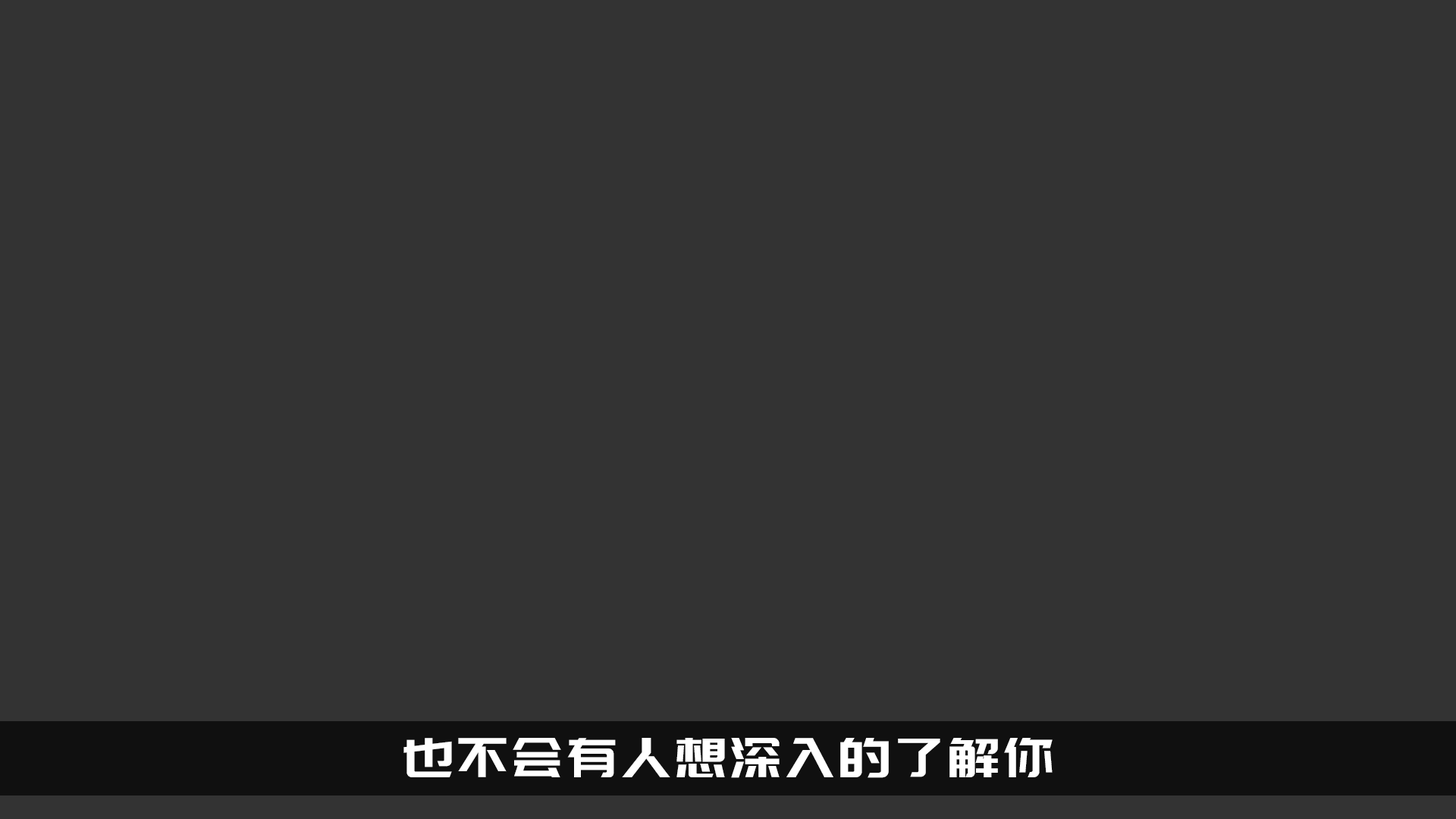
<style>
.page{position:relative;width:1456px;height:819px;background:#333333}
.page>*{position:absolute;margin:0}
.t1{font:54.6px "PangMenZhengDao-3";color:#ffffff}
</style>
<div class="page">
<p class="t1" style="left:403px;top:738px;width:650px;height:40px">也不会有人想深入的了解你</p>
</div>
